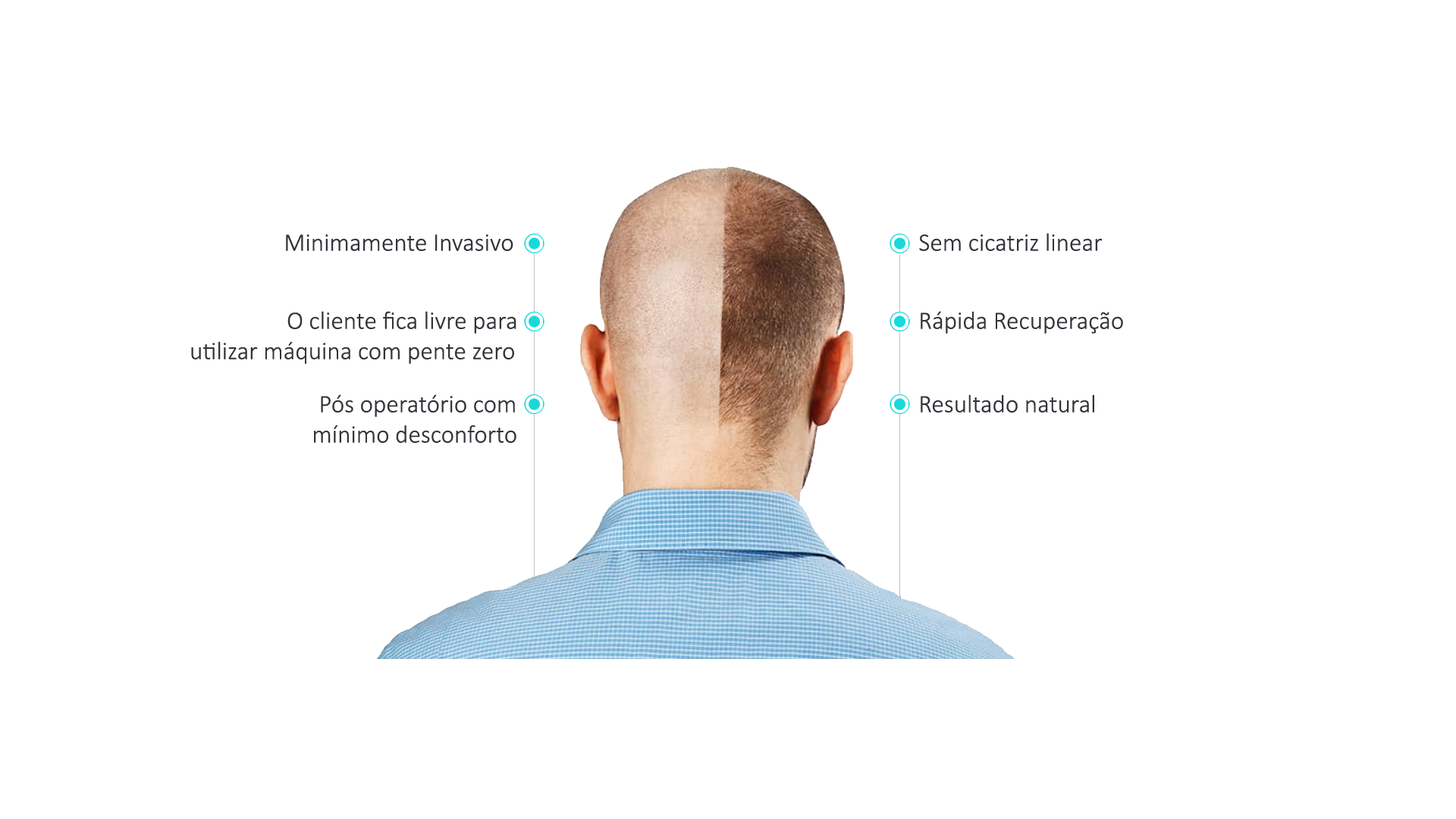
<style>
.page{position:relative;width:1456px;height:819px;background:#ffffff}
.page>*{position:absolute;margin:0}
.t1{font:25.3px "Calibri-Light";color:#34333a}
</style>
<div class="page">
<p class="t1" style="left:919px;top:233px;width:184px;height:18px">Sem cicatriz linear</p>
<p class="t1" style="left:286px;top:234px;width:227px;height:17px">Minimamente Invasivo</p>
<p class="t1" style="left:191px;top:311px;width:325px;height:53px">O cliente fica livre para<br>    utilizar máquina com pente zero</p>
<p class="t1" style="left:921px;top:311px;width:202px;height:23px">Rápida Recuperação</p>
<p class="t1" style="left:314px;top:394px;width:202px;height:49px">Pós operatório com<br>       mínimo desconforto</p>
<p class="t1" style="left:921px;top:394px;width:173px;height:19px">Resultado natural</p>
</div>
